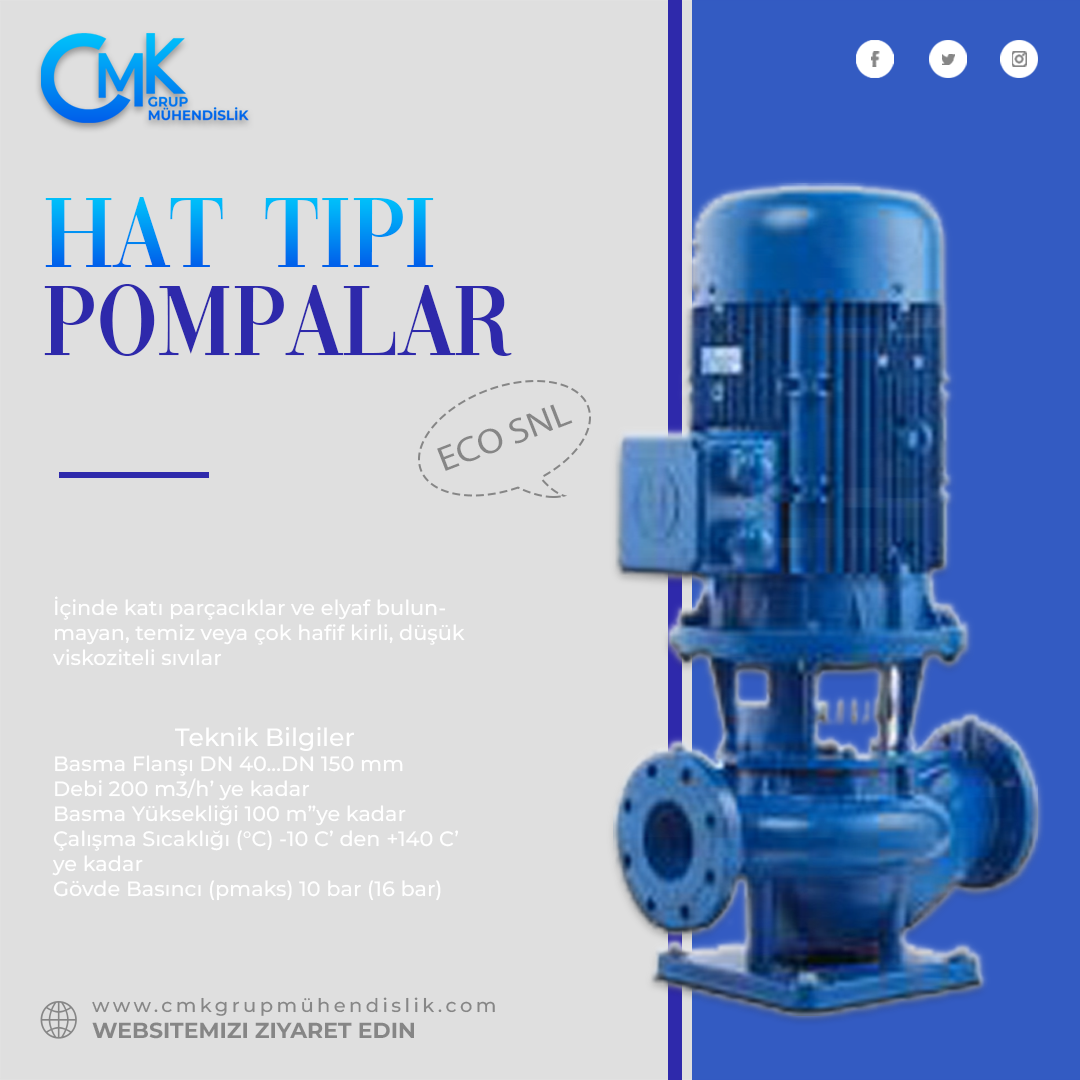
<style>
.page{position:relative;width:1080px;height:1080px;background:#dfdfdf}
.page>*{position:absolute;margin:0}
.t1{font:104.2px "Vogue-Regular"}
.t2{font:104.2px "Vogue-Regular";color:#2e29ab}
.t3{font:35.4px "MyriadPro-Regular";color:#868686;scale:1.1 1}
.t4{font:20.8px "Montserrat-Medium";color:#ffffff}
.t5{font:25px "Montserrat-Medium";color:#ffffff}
.t6{font:19px "Montserrat-Medium";letter-spacing:0.18em;color:#868686}
.t7{font:21.8px "Montserrat-Bold";color:#868686;text-transform:uppercase}
</style>
<div class="page">
<p class="t1" style="left:45px;top:197px;width:389px;height:70px">Hat Tipi</p>
<p class="t2" style="left:44px;top:284px;width:468px;height:72px">Pompalar</p>
<p class="t3" style="left:437px;top:404px;width:136px;height:67px;rotate:-21deg">ECO SNL</p>
<p class="t4" style="left:53px;top:596px;width:412px;height:70px;text-align:right">İçinde katı parçacıklar ve elyaf bulunmayan, temiz veya çok hafif kirli, düşük viskoziteli sıvılar</p>
<p class="t4" style="left:52px;top:727px;width:406px;height:174px;text-align:center"><span class="t5">Teknik Bilgiler<br></span>Basma Flanşı DN 40…DN 150 mm<br>Debi 200 m3/h’ ye kadar<br>Basma Yüksekliği 100 m”ye kadar<br>Çalışma Sıcaklığı (°C) -10 C’ den +140 C’ ye kadar<br>Gövde Basıncı (pmaks) 10 bar (16 bar)</p>
<p class="t6" style="left:92px;top:997px;width:403px;height:19px">www.cmkgrupmühendislik.com</p>
<p class="t7" style="left:92px;top:1022px;width:322px;height:17px">websitemizi ziyaret edin</p>
</div>
